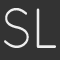
<style>
.page{position:relative;width:60px;height:60px;background:#333333}
.page>*{position:absolute;margin:0}
.t1{font:56.6px "Quicksand-Regular";color:#eeeeee;scale:0.83 1}
</style>
<div class="page">
<p class="t1" style="left:4px;top:8px;width:52px;height:40px">SL</p>
</div>
